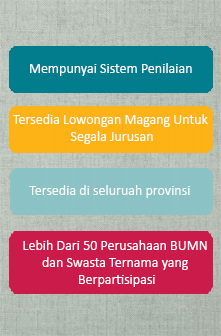
<style>
.page{position:relative;width:221px;height:336px}
.page>*{position:absolute;margin:0}
.t1{font:14px "Calibri";color:#fefefe}
</style>
<div class="page">
<p class="t1" style="left:30px;top:63px;width:162px;height:13px">Mempunyai Sistem Penilaian</p>
<p class="t1" style="left:13px;top:114px;width:195px;height:30px;text-align:center">Tersedia Lowongan Magang Untuk <br>Segala Jurusan</p>
<p class="t1" style="left:29px;top:185px;width:161px;height:13px">Tersedia di seluruah provinsi</p>
<p class="t1" style="left:23px;top:240px;width:184px;height:47px;text-align:center">Lebih Dari 50 Perusahaan BUMN <br>dan Swasta Ternama yang <br>Berpartisipasi</p>
</div>
